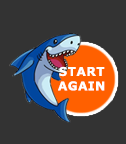
<style>
.page{position:relative;width:126px;height:144px;background:#333333}
.page>*{position:absolute;margin:0}
.t1{font:12px "Verdana-Bold";letter-spacing:0.05em;color:#ffffff}
</style>
<div class="page">
<p class="t1" style="left:58px;top:66px;width:47px;height:25px;text-align:center">START<br>AGAIN</p>
</div>
